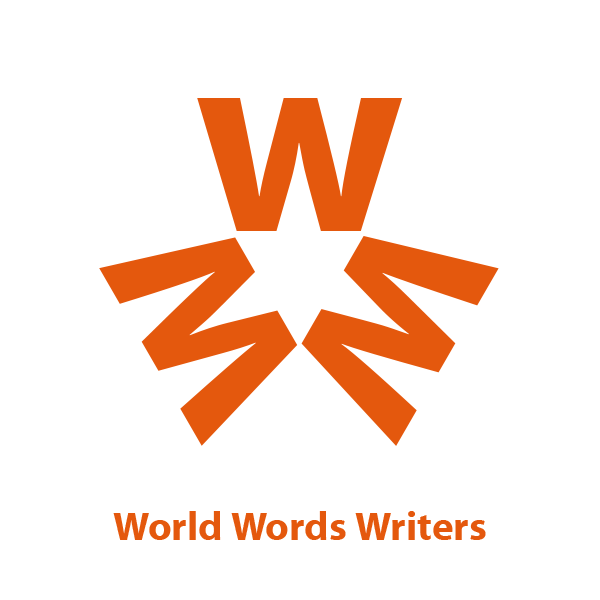
<style>
.page{position:relative;width:600px;height:600px;background:#ffffff}
.page>*{position:absolute;margin:0}
.t1{font:272.2px "MyriadWebPro-Bold";color:#e4580d}
.t2{font:272.1px "MyriadWebPro-Bold";color:#e4580d}
.t3{font:40px "MyriadWebPro-Bold";color:#e4580d}
</style>
<div class="page">
<p class="t1" style="left:197px;top:98px;width:206px;height:133px">w</p>
<p class="t2" style="left:99px;top:237px;width:199px;height:209px;rotate:-120deg">w</p>
<p class="t2" style="left:301px;top:236px;width:198px;height:210px;rotate:120deg">w</p>
<p class="t3" style="left:113px;top:511px;width:373px;height:29px">World Words Writers</p>
</div>
